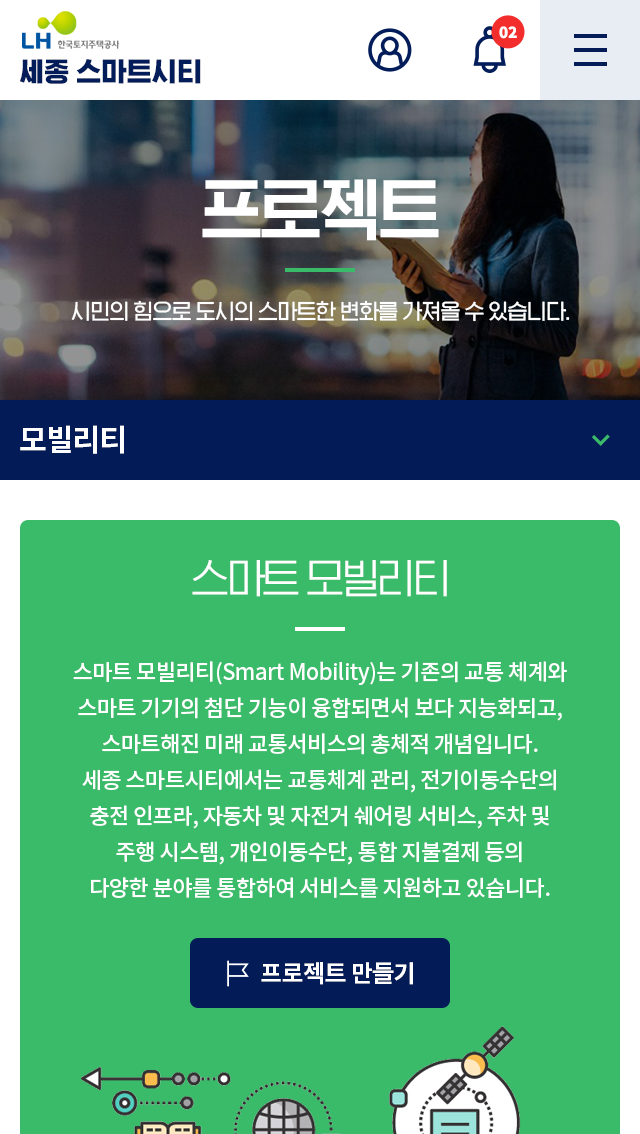
<style>
.page{position:relative;width:640px;height:1134px;background:#3abb69}
.page>*{position:absolute;margin:0}
.t1{font:15px "NotoSansKR-Black";color:#ffffff}
.t2{font:28px "HGGGothicssi99g";color:#031d5b}
.t3{font:70px "HGGGothicssi80g";letter-spacing:-0.05em;color:#ffffff}
.t4{font:22px "HGGGothicssi60g";letter-spacing:-0.025em;color:#ffffff}
.t5{font:30px "NotoSansKR-Bold";letter-spacing:-0.025em;color:#ffffff}
.t6{font:42px "HGGGothicssi40g";letter-spacing:-0.05em;color:#ffffff}
.t7{font:22px/36px "NotoSansKR-Medium";letter-spacing:-0.025em;color:#ffffff}
.t8{font:24px "NotoSansKR-Bold";letter-spacing:-0.025em;color:#ffffff}
</style>
<div class="page">
<p class="t1" style="left:499px;top:26px;width:18px;height:13px">02</p>
<p class="t2" style="left:19px;top:59px;width:182px;height:25px">세종 스마트시티</p>
<p class="t3" style="left:202px;top:179px;width:237px;height:62px">프로젝트</p>
<p class="t4" style="left:71px;top:300px;width:499px;height:22px">시민의 힘으로 도시의 스마트한 변화를 가져올 수 있습니다.</p>
<p class="t5" style="left:20px;top:425px;width:104px;height:29px">모빌리티</p>
<p class="t6" style="left:192px;top:560px;width:255px;height:37px">스마트 모빌리티</p>
<p class="t7" style="left:73px;top:661px;width:494px;height:237px;text-align:center">스마트 모빌리티(Smart Mobility)는 기존의 교통 체계와<br>스마트 기기의 첨단 기능이 융합되면서 보다 지능화되고,<br>스마트해진 미래 교통서비스의 총체적 개념입니다.<br>세종 스마트시티에서는 교통체계 관리, 전기이동수단의<br>충전 인프라, 자동차 및 자전거 쉐어링 서비스, 주차 및<br>주행 시스템, 개인이동수단, 통합 지불결제 등의<br>다양한 분야를 통합하여 서비스를 지원하고 있습니다.</p>
<p class="t8" style="left:261px;top:962px;width:152px;height:23px">프로젝트 만들기</p>
</div>
